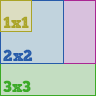
<style>
.page{position:relative;width:96px;height:96px;background:#c1d3dd}
.page>*{position:absolute;margin:0}
.t1{font:16px "ChunkFivePrint";color:#aaa427}
.t2{font:16px "ChunkFivePrint";color:#275baa}
.t3{font:16px "ChunkFivePrint";color:#3baa27}
</style>
<div class="page">
<p class="t1" style="left:3px;top:16px;width:26px;height:13px">1x1</p>
<p class="t2" style="left:3px;top:49px;width:30px;height:13px">2x2</p>
<p class="t2" style="left:4px;top:49px;width:29px;height:13px">2x3</p>
<p class="t3" style="left:3px;top:80px;width:28px;height:13px">3x3</p>
</div>
